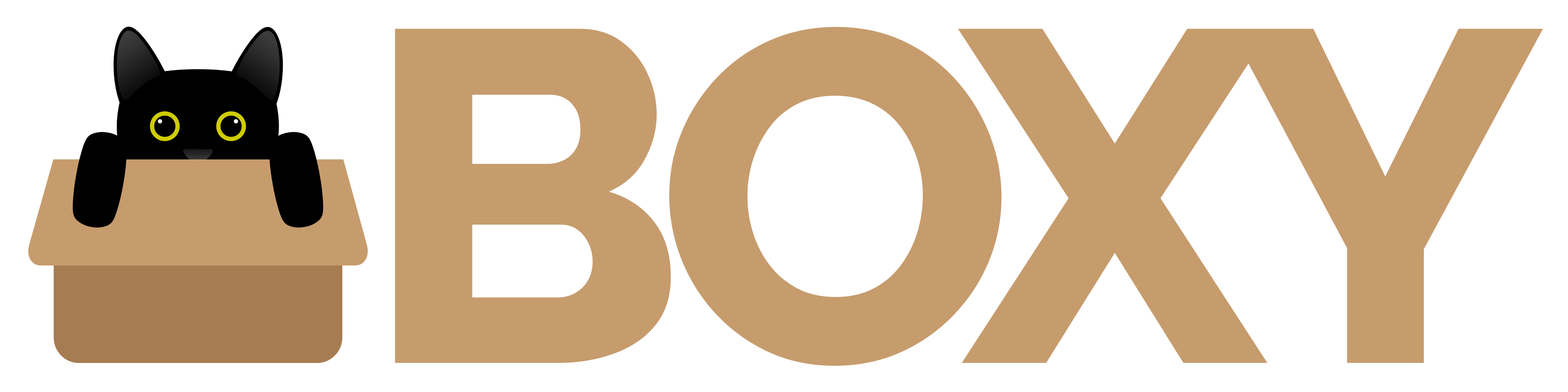
<style>
.page{position:relative;width:1568px;height:392px;background:#ffffff}
.page>*{position:absolute;margin:0}
.t1{font:470.4px "RalewayRoman-ExtraBold";letter-spacing:-0.08em;color:#c69c6d;text-transform:uppercase;font-weight:bold}
.t2{font:470.4px "RalewayRoman-ExtraBold";letter-spacing:-0.06em;color:#c69c6d;text-transform:uppercase;font-weight:bold}
</style>
<div class="page">
<p class="t1" style="left:395px;top:27px;width:1148px;height:339px"><span class="t2">b</span>ox<span class="t2">y</span></p>
</div>
